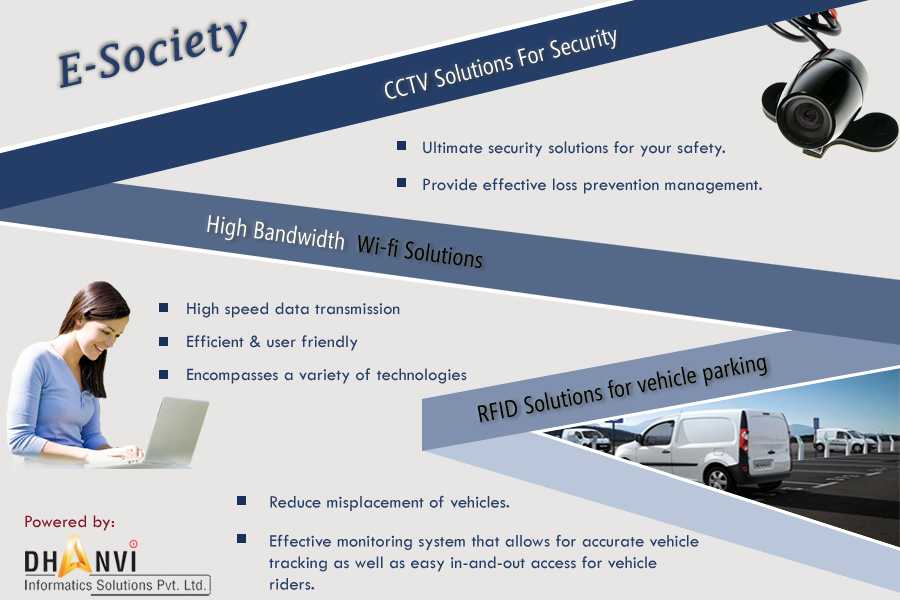
<style>
.page{position:relative;width:900px;height:600px;background:#e7e6e4}
.page>*{position:absolute;margin:0}
.t1{font:41.7px "LucidaFax-Italic";letter-spacing:0.01em;color:#253e68;font-weight:bold}
.t2{font:18px "TwCenMT-Regular";letter-spacing:0.01em;color:#253e68}
.t3{font:18px/30px "TwCenMT-Regular";letter-spacing:0.01em;color:#253e68}
.t4{font:24px "SegoeCondensed";letter-spacing:0.01em;color:#010101}
.t5{font:18px "TwCenMT-Regular";letter-spacing:0.01em;color:#841525}
</style>
<div class="page">
<p class="t1" style="left:59px;top:21px;width:188px;height:67px;rotate:-13deg">E-Society</p>
<p class="t2" style="left:423px;top:141px;width:302px;height:16px">Ultimate security solutions for your safety.</p>
<p class="t2" style="left:423px;top:178px;width:339px;height:16px">Provide effective loss prevention management.</p>
<p class="t3" style="left:187px;top:302px;width:280px;height:82px">High speed data transmission<br>Efficient &amp; user friendly<br>Encompasses a variety of technologies</p>
<p class="t4" style="left:477px;top:357px;width:290px;height:66px;rotate:-11deg">RFID Solutions for vehicle parking</p>
<p class="t2" style="left:270px;top:495px;width:239px;height:16px">Reduce misplacement of vehicles.</p>
<p class="t5" style="left:25px;top:515px;width:89px;height:16px">Powered by:</p>
<p class="t2" style="left:269px;top:534px;width:430px;height:56px">Effective monitoring system that allows for accurate vehicle tracking as well as easy in-and-out access for vehicle riders.</p>
</div>
